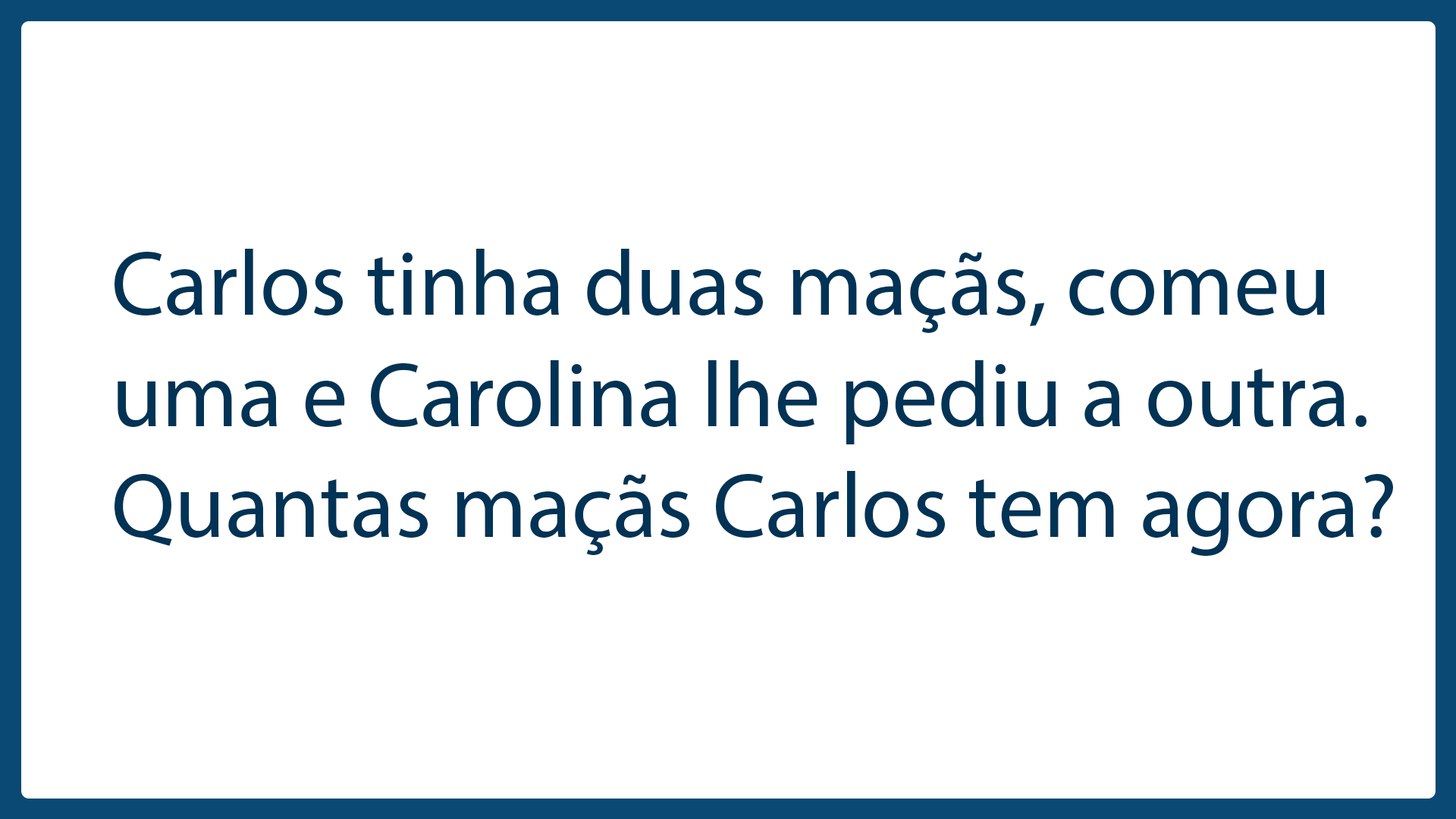
<style>
.page{position:relative;width:1456px;height:819px;background:#ffffff}
.page>*{position:absolute;margin:0}
.t1{font:92.6px "MyriadPro-Regular";color:#003355}
</style>
<div class="page">
<p class="t1" style="left:115px;top:249px;width:1278px;height:308px">Carlos tinha duas maçãs, comeu uma e Carolina lhe pediu a outra. Quantas maçãs Carlos tem agora?</p>
</div>
